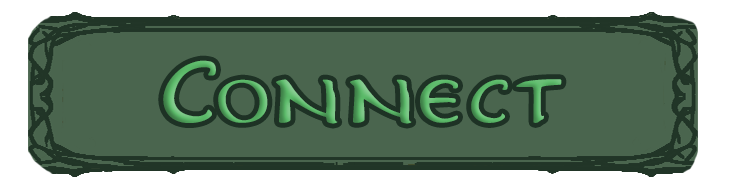
<style>
.page{position:relative;width:732px;height:195px;background:#4a654e}
.page>*{position:absolute;margin:0}
.t1{font:86.4px "MiddleEarth";color:#5bba69}
</style>
<div class="page">
<p class="t1" style="left:163px;top:60px;width:399px;height:64px">Connect</p>
</div>
